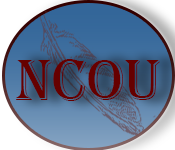
<style>
.page{position:relative;width:175px;height:150px}
.page>*{position:absolute;margin:0}
.t1{font:59.6px "Algerian";color:#660000}
</style>
<div class="page">
<p class="t1" style="left:16px;top:59px;width:144px;height:42px">NCOU</p>
</div>
